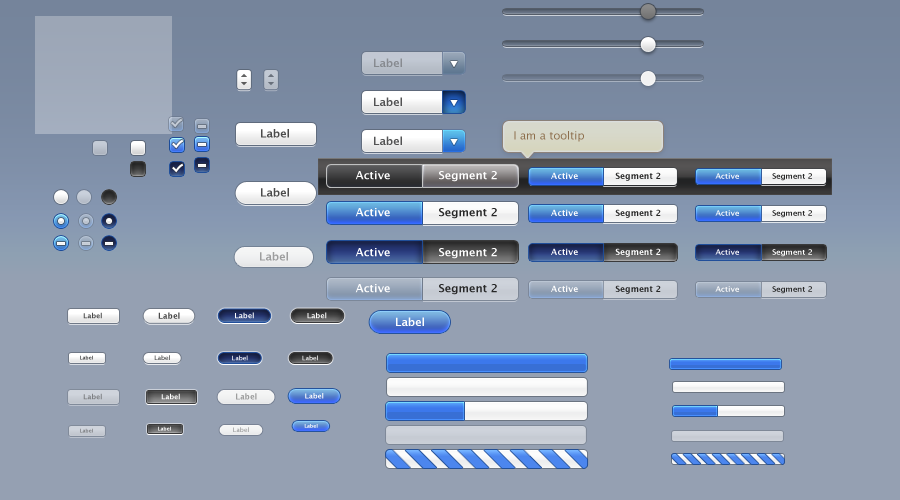
<style>
.page{position:relative;width:900px;height:500px;background:#95a0b2}
.page>*{position:absolute;margin:0}
.t1{font:11px "LucidaGrande-Bold";color:#878b90}
.t2{font:11px "LucidaGrande-Bold";color:#535354}
.t3{font:11px "LucidaGrande-Bold";color:#4a4a4a}
.t4{font:11px "LucidaGrande";color:#8c6d4b}
.t5{font:11px "LucidaGrande-Bold";color:#ffffff}
.t6{font:11px "LucidaGrande-Bold";color:#fefefe}
.t7{font:8.5px "LucidaGrande-Bold";color:#272727}
.t8{font:8.5px "LucidaGrande-Bold";color:#fefefe}
.t9{font:7.5px "LucidaGrande-Bold";color:#272727}
.t10{font:7.5px "LucidaGrande-Bold";color:#fefefe}
.t11{font:11px "LucidaGrande-Bold";color:#272727}
.t12{font:11px "LucidaGrande-Bold";color:#9c9d9d}
.t13{font:8.5px "LucidaGrande-Bold";color:#ffffff}
.t14{font:7.5px "LucidaGrande-Bold";color:#ffffff}
.t15{font:7px "LucidaGrande-Bold";color:#4a4a4a}
.t16{font:8.1px "LucidaGrande-Bold";color:#4a4a4a}
.t17{font:7.3px "LucidaGrande-Bold";color:#fefefe}
.t18{font:7.4px "LucidaGrande-Bold";color:#fefefe}
.t19{font:5px "LucidaGrande-Bold"}
.t20{font:5.9px "LucidaGrande-Bold"}
.t21{font:6.1px "LucidaGrande-Bold"}
.t22{font:6px "LucidaGrande-Bold"}
.t23{font:7px "LucidaGrande-Bold";color:#7d7f82}
.t24{font:7px "LucidaGrande-Bold";color:#ffffff}
.t25{font:8px "LucidaGrande-Bold";color:#9d9d9d}
.t26{font:7px "LucidaGrande-Bold";color:#fefefe}
</style>
<div class="page">
<p class="t1" style="left:374px;top:58px;width:28px;height:9px">Label</p>
<p class="t2" style="left:374px;top:97px;width:28px;height:9px">Label</p>
<p class="t3" style="left:261px;top:129px;width:28px;height:9px">Label</p>
<p class="t2" style="left:374px;top:136px;width:28px;height:9px">Label</p>
<p class="t4" style="left:514px;top:131px;width:70px;height:11px">I am a tooltip</p>
<p class="t5" style="left:355px;top:171px;width:142px;height:11px"><span class="t6">   Active        </span>Segment 2</p>
<p class="t7" style="left:551px;top:172px;width:110px;height:9px"><span class="t8">   Active     </span>   Segment 2</p>
<p class="t9" style="left:715px;top:173px;width:97px;height:8px"><span class="t10">   Active     </span>   Segment 2</p>
<p class="t3" style="left:261px;top:188px;width:28px;height:9px">Label</p>
<p class="t11" style="left:355px;top:208px;width:142px;height:11px"><span class="t6">   Active     </span>   Segment 2</p>
<p class="t7" style="left:551px;top:209px;width:110px;height:9px"><span class="t8">   Active     </span>   Segment 2</p>
<p class="t9" style="left:715px;top:210px;width:97px;height:8px"><span class="t10">   Active     </span>   Segment 2</p>
<p class="t12" style="left:260px;top:252px;width:28px;height:9px">Label</p>
<p class="t5" style="left:355px;top:248px;width:142px;height:11px">Active        Segment 2</p>
<p class="t13" style="left:551px;top:248px;width:110px;height:9px">Active        Segment 2</p>
<p class="t14" style="left:715px;top:249px;width:97px;height:8px">Active        Segment 2</p>
<p class="t11" style="left:355px;top:284px;width:142px;height:11px"><span class="t6">   Active     </span>   Segment 2</p>
<p class="t7" style="left:551px;top:285px;width:110px;height:9px"><span class="t8">   Active     </span>   Segment 2</p>
<p class="t9" style="left:715px;top:286px;width:97px;height:8px"><span class="t10">   Active     </span>   Segment 2</p>
<p class="t15" style="left:83px;top:312px;width:19px;height:7px">Label</p>
<p class="t16" style="left:158px;top:312px;width:22px;height:7px">Label</p>
<p class="t17" style="left:235px;top:312px;width:19px;height:7px">Label</p>
<p class="t18" style="left:307px;top:312px;width:20px;height:7px">Label</p>
<p class="t6" style="left:396px;top:317px;width:28px;height:9px">Label</p>
<p class="t19" style="left:80px;top:355px;width:13px;height:5px">Label</p>
<p class="t20" style="left:154px;top:355px;width:16px;height:5px">Label</p>
<p class="t21" style="left:232px;top:355px;width:16px;height:6px">Label</p>
<p class="t22" style="left:302px;top:355px;width:16px;height:6px">Label</p>
<p class="t23" style="left:83px;top:393px;width:19px;height:7px">Label</p>
<p class="t24" style="left:161px;top:393px;width:19px;height:7px">Label</p>
<p class="t25" style="left:236px;top:393px;width:21px;height:7px">Label</p>
<p class="t26" style="left:305px;top:393px;width:19px;height:6px">Label</p>
<p class="t19" style="left:304px;top:424px;width:14px;height:4px">Label</p>
<p class="t19" style="left:80px;top:428px;width:13px;height:5px">Label</p>
<p class="t19" style="left:158px;top:426px;width:13px;height:5px">Label</p>
<p class="t21" style="left:233px;top:427px;width:16px;height:5px">Label</p>
</div>
